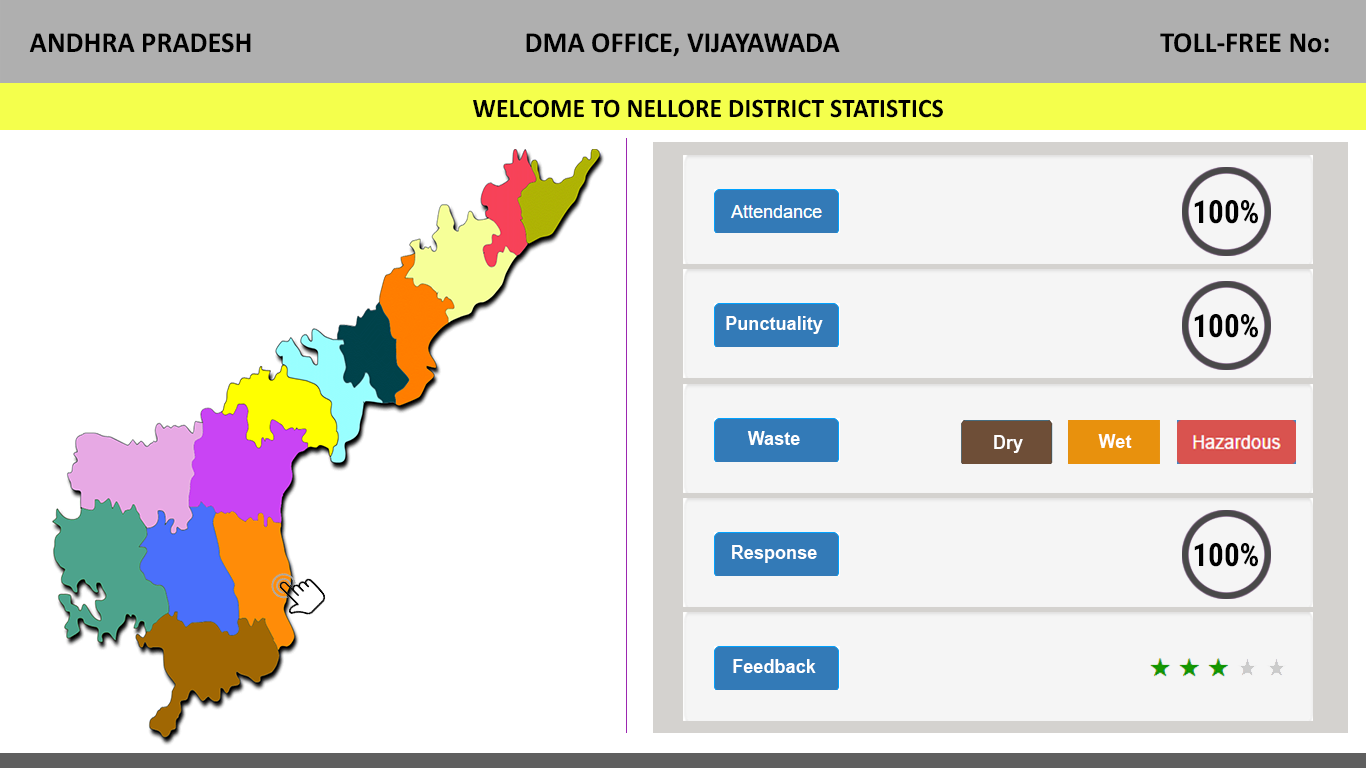
<style>
.page{position:relative;width:1366px;height:768px;background:#ffffff}
.page>*{position:absolute;margin:0}
.t1{font:29.3px "Calibri-Bold";color:#000000;scale:0.97 1}
.t2{font:26.7px "Calibri-Bold";color:#000000;scale:0.97 1}
.t3{font:32px "RobotoCondensed-Bold";color:#000000;scale:0.97 1}
.t4{font:18.7px "Arial-BoldMT";color:#ffffff;scale:0.97 1}
</style>
<div class="page">
<p class="t1" style="left:29px;top:33px;width:222px;height:20px">ANDHRA PRADESH</p>
<p class="t1" style="left:526px;top:33px;width:314px;height:24px">DMA OFFICE, VIJAYAWADA</p>
<p class="t1" style="left:1160px;top:33px;width:169px;height:20px">TOLL-FREE No:</p>
<p class="t2" style="left:473px;top:99px;width:470px;height:19px">WELCOME TO NELLORE DISTRICT STATISTICS</p>
<p class="t3" style="left:1194px;top:200px;width:64px;height:24px">100%</p>
<p class="t4" style="left:726px;top:316px;width:97px;height:18px">Punctuality</p>
<p class="t3" style="left:1194px;top:314px;width:64px;height:24px">100%</p>
<p class="t4" style="left:747px;top:431px;width:53px;height:14px">Waste</p>
<p class="t4" style="left:732px;top:545px;width:85px;height:18px">Response</p>
<p class="t3" style="left:1194px;top:543px;width:64px;height:24px">100%</p>
<p class="t4" style="left:733px;top:659px;width:83px;height:14px">Feedback</p>
</div>
